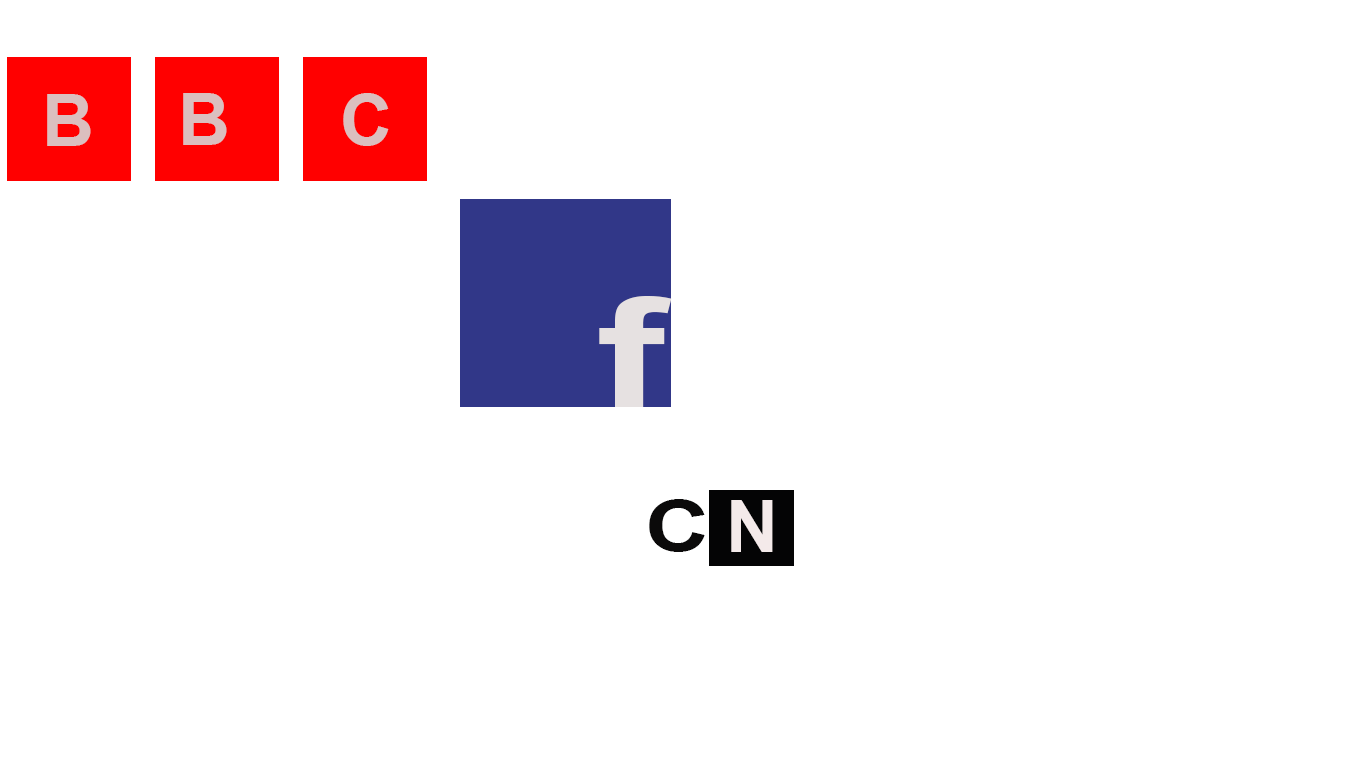
<style>
.page{position:relative;width:1366px;height:768px;background:#ffffff}
.page>*{position:absolute;margin:0}
.t1{font:72px "Arial-BoldMT";color:#dbbfbf}
.t2{font:152.3px "Arial-BoldMT";color:#e6e1e1;scale:1.35 1}
.t3{font:72px "Arial-BoldMT";color:#0b0a0a;scale:1.23 1}
.t4{font:72px "Arial-BoldMT";color:#f4eaea}
</style>
<div class="page">
<p class="t1" style="left:47px;top:94px;width:44px;height:52px">B</p>
<p class="t1" style="left:183px;top:93px;width:44px;height:52px">B</p>
<p class="t1" style="left:343px;top:93px;width:46px;height:53px">C</p>
<p class="t2" style="left:599px;top:296px;width:73px;height:111px">f</p>
<p class="t3" style="left:649px;top:499px;width:56px;height:53px">C</p>
<p class="t4" style="left:731px;top:500px;width:42px;height:52px">N</p>
</div>
